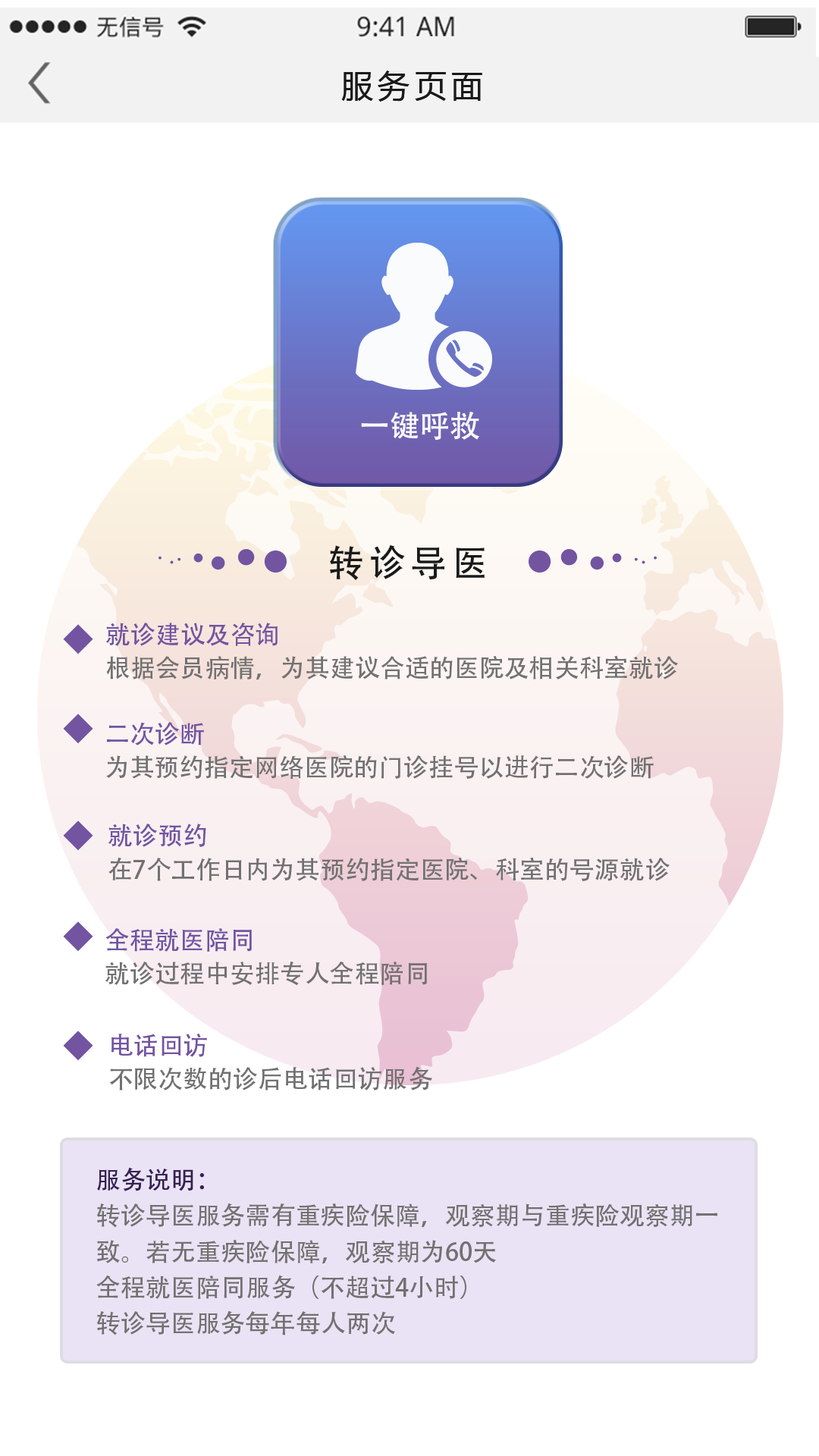
<style>
.page{position:relative;width:819px;height:1456px;background:#ffffff}
.page>*{position:absolute;margin:0}
.t1{font:32.1px "MicrosoftYaHeiUI";letter-spacing:0.14em;color:#1a1a1a}
.t2{font:30.3px "AdobeHeitiStd-Regular";color:#f9f8f8;text-transform:uppercase}
.t3{font:36.4px "AdobeHeitiStd-Regular";letter-spacing:0.14em;color:#1a1a1a}
.t4{font:25px/33.4px "AdobeHeitiStd-Regular";color:#727171}
.t5{font:25px/33.4px "AdobeHeitiStd-Regular";color:#7254a1}
.t6{font:25px/33.6px "AdobeHeitiStd-Regular";color:#727171}
.t7{font:25px/26.7px "AdobeHeitiStd-Regular";color:#7254a1}
.t8{font:25px/35.7px "AdobeHeitiStd-Regular";color:#727171}
.t9{font:25px/35.7px "AdobeHeitiStd-Regular";color:#342152}
</style>
<div class="page">
<p class="t1" style="left:341px;top:71px;width:141px;height:31px">服务页面</p>
<p class="t2" style="left:361px;top:411px;width:118px;height:30px">一键呼救</p>
<p class="t3" style="left:330px;top:544px;width:155px;height:36px">转诊导医</p>
<p class="t4" style="left:105px;top:623px;width:573px;height:57px"><span class="t5">就诊建议及咨询<br></span>根据会员病情，为其建议合适的医院及相关科室就诊</p>
<p class="t6" style="left:106px;top:722px;width:548px;height:57px"><span class="t7">二次诊断<br></span>为其预约指定网络医院的门诊挂号以进行二次诊断</p>
<p class="t6" style="left:108px;top:824px;width:562px;height:57px"><span class="t7">就诊预约<br></span>在7个工作日内为其预约指定医院、科室的号源就诊</p>
<p class="t6" style="left:105px;top:928px;width:322px;height:58px"><span class="t7">全程就医陪同<br></span>就诊过程中安排专人全程陪同</p>
<p class="t6" style="left:109px;top:1034px;width:323px;height:56px"><span class="t7">电话回访<br></span>不限次数的诊后电话回访服务</p>
<p class="t8" style="left:96px;top:1167px;width:621px;height:168px"><span class="t9">服务说明：<br></span>转诊导医服务需有重疾险保障，观察期与重疾险观察期一致。若无重疾险保障，观察期为60天<br>全程就医陪同服务（不超过4小时）<br>转诊导医服务每年每人两次</p>
</div>
